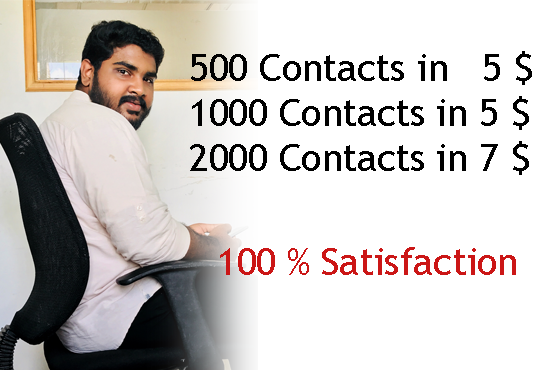
<style>
.page{position:relative;width:550px;height:370px;background:#ffffff}
.page>*{position:absolute;margin:0}
.t1{font:37.5px "TrebuchetMS";color:#000000}
.t2{font:37.5px "TrebuchetMS";color:#cb1616}
</style>
<div class="page">
<p class="t1" style="left:190px;top:51px;width:342px;height:124px">500 Contacts in   5 $<br>1000 Contacts in 5 $<br>2000 Contacts in 7 $</p>
<p class="t2" style="left:220px;top:247px;width:296px;height:28px">100 % Satisfaction</p>
</div>
